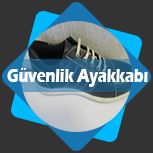
<style>
.page{position:relative;width:153px;height:153px;background:#333333}
.page>*{position:absolute;margin:0}
.t1{font:20.3px "ErasITC-Bold";color:#ffffff;scale:0.72 1}
</style>
<div class="page">
<p class="t1" style="left:7px;top:68px;width:141px;height:19px">Güvenlik Ayakkabı</p>
</div>
